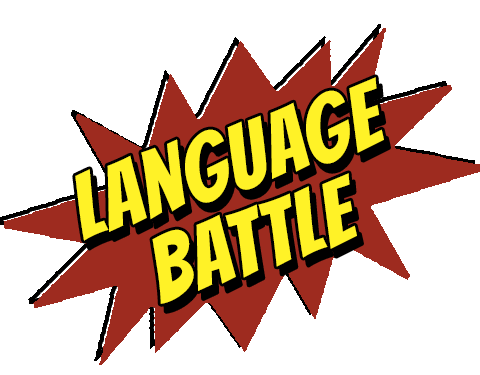
<style>
.page{position:relative;width:480px;height:375px;background:#ffffff}
.page>*{position:absolute;margin:0}
.t1{font:90px/84px "Bangers-Regular";letter-spacing:0.025em;color:#fff227}
</style>
<div class="page">
<p class="t1" style="left:75px;top:77px;width:309px;height:227px;text-align:center;rotate:-18deg">Language<br>Battle</p>
</div>
